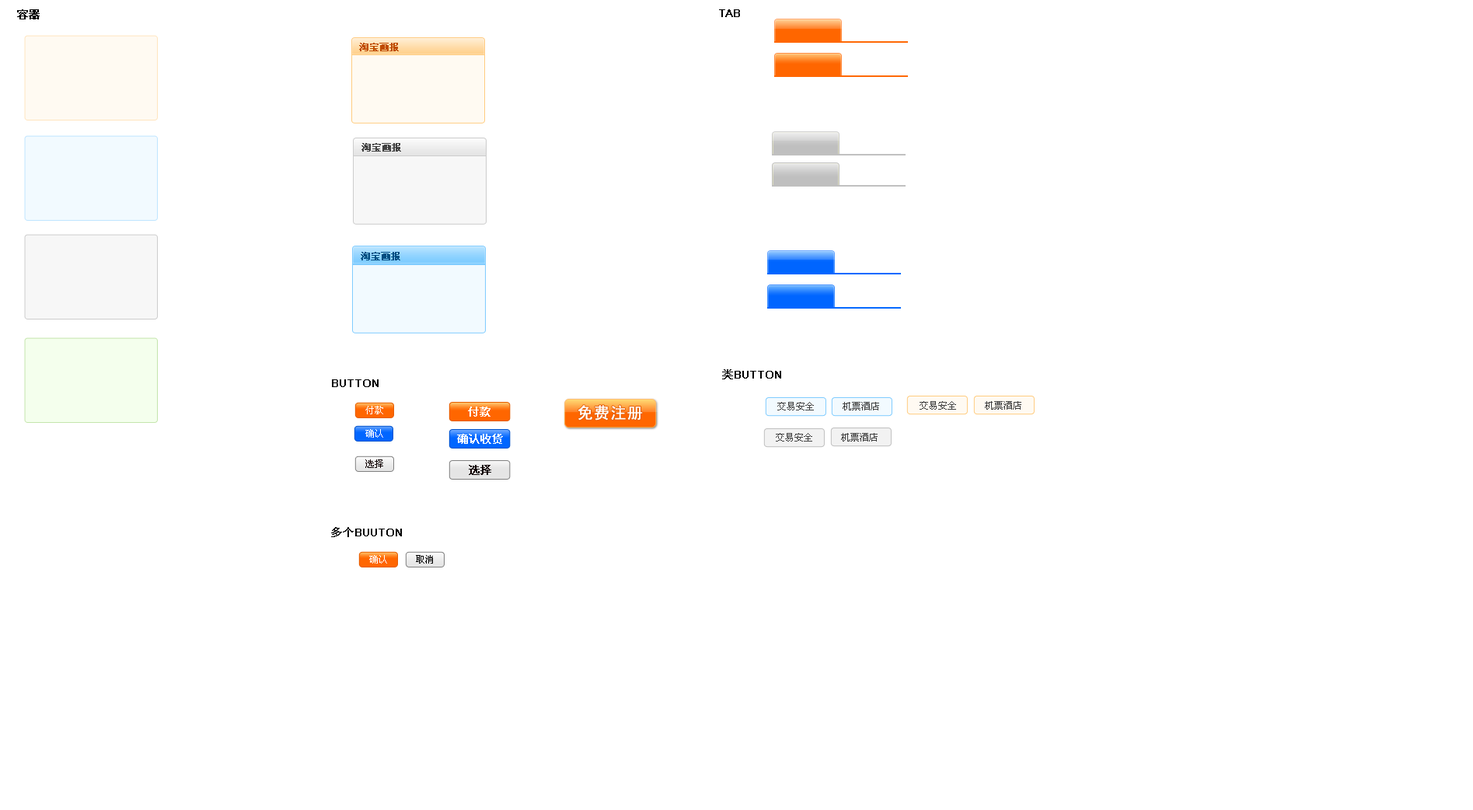
<style>
.page{position:relative;width:1473px;height:810px;background:#ffffff}
.page>*{position:absolute;margin:0}
.t1{font:10.9px "SimSun";color:#000000;font-weight:bold}
.t2{font:10.9px "ArialMT";color:#000000;font-weight:bold}
.t3{font:9.4px "SimSun";letter-spacing:0.005em;color:#bf4c00;font-weight:bold}
.t4{font:9.4px "SimSun";letter-spacing:0.005em;color:#404040;font-weight:bold}
.t5{font:9.4px "SimSun";letter-spacing:0.005em;color:#004d80;font-weight:bold}
.t6{font:9.3px "SimSun";color:#404040}
.t7{font:9.3px "SimSun";color:#ffffff}
.t8{font:10.9px "SimSun";color:#ffffff;font-weight:bold}
.t9{font:16.2px "SimHei";color:#ffffff;font-weight:bold}
.t10{font:9.3px "SimSun";color:#0f0000}
.t11{font:10.9px "SimSun";color:#0f0000;font-weight:bold}
.t12{font:9.3px "SimSun";color:#000000}
</style>
<div class="page">
<p class="t1" style="left:17px;top:9px;width:23px;height:10px">容器</p>
<p class="t2" style="left:719px;top:9px;width:21px;height:8px">TAB</p>
<p class="t3" style="left:359px;top:43px;width:40px;height:8px">淘宝画报</p>
<p class="t4" style="left:361px;top:143px;width:40px;height:9px">淘宝画报</p>
<p class="t5" style="left:361px;top:252px;width:39px;height:8px">淘宝画报</p>
<p class="t2" style="left:722px;top:369px;width:59px;height:10px"><span class="t1">类</span>BUTTON</p>
<p class="t2" style="left:332px;top:379px;width:46px;height:8px">BUTTON</p>
<p class="t6" style="left:777px;top:402px;width:102px;height:8px">交易安全      机票酒店</p>
<p class="t6" style="left:919px;top:401px;width:102px;height:9px">交易安全      机票酒店</p>
<p class="t7" style="left:365px;top:406px;width:18px;height:8px">付款</p>
<p class="t8" style="left:468px;top:406px;width:22px;height:11px">付款</p>
<p class="t9" style="left:577px;top:405px;width:66px;height:15px">免费注册</p>
<p class="t7" style="left:365px;top:429px;width:18px;height:9px">确认</p>
<p class="t8" style="left:457px;top:434px;width:46px;height:10px">确认收货</p>
<p class="t6" style="left:776px;top:433px;width:101px;height:8px">交易安全      机票酒店</p>
<p class="t10" style="left:365px;top:459px;width:18px;height:9px">选择</p>
<p class="t11" style="left:469px;top:465px;width:22px;height:10px">选择</p>
<p class="t2" style="left:331px;top:527px;width:71px;height:10px"><span class="t1">多个</span>BUUTON</p>
<p class="t7" style="left:369px;top:555px;width:18px;height:8px">确认</p>
<p class="t12" style="left:416px;top:555px;width:17px;height:8px">取消</p>
</div>
